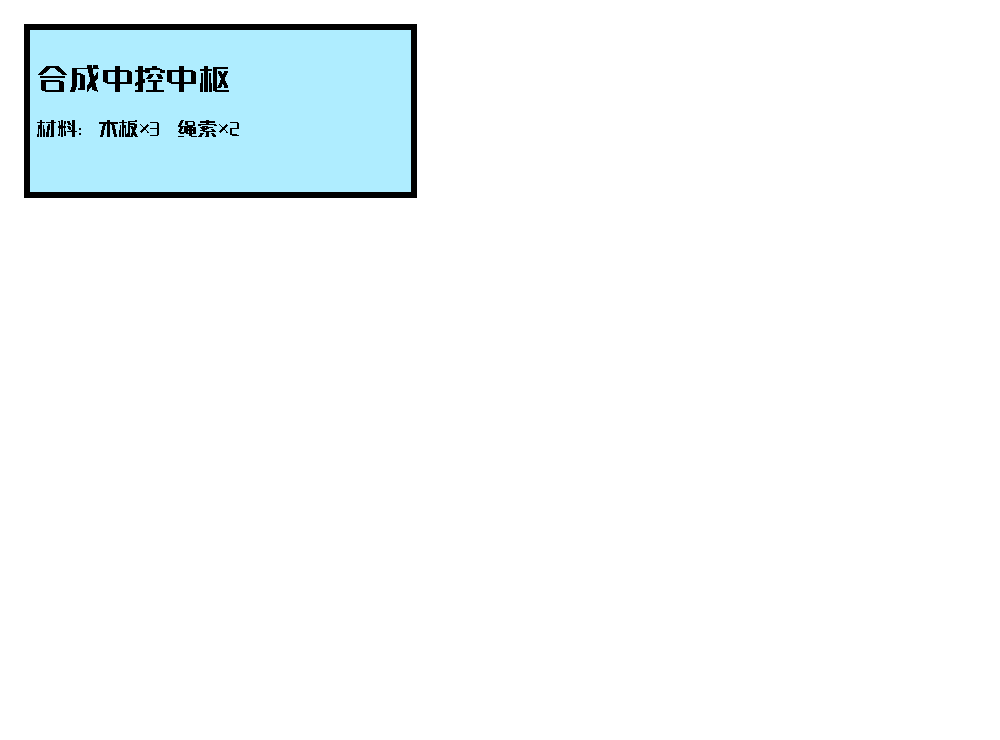
<style>
.page{position:relative;width:1000px;height:740px;background:#ffffff}
.page>*{position:absolute;margin:0}
.t1{font:20.8px/45.8px "eykjh";letter-spacing:-0.02em;color:#000000}
.t2{font:33.3px/45.8px "eykjh";letter-spacing:-0.02em;color:#000000}
</style>
<div class="page">
<p class="t1" style="left:37px;top:65px;width:202px;height:72px"><span class="t2">合成中控中枢<br></span>材料：木板×3   绳索×2</p>
</div>
